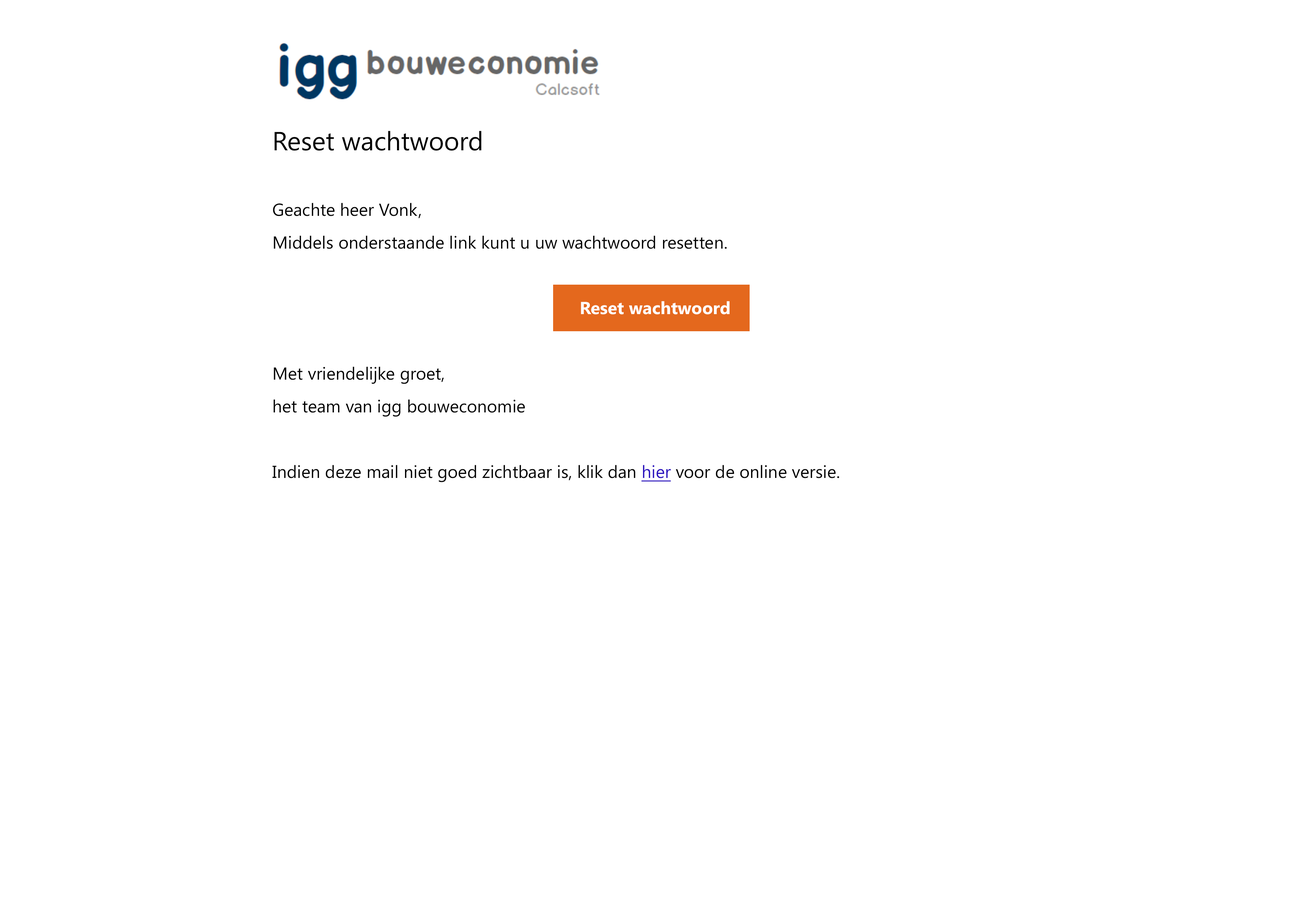
<style>
.page{position:relative;width:1310px;height:910px;background:#ffffff}
.page>*{position:absolute;margin:0}
.t1{font:17.5px/32.8px "SegoeUI";color:#000000}
.t2{font:26.2px/32.8px "SegoeUI";color:#000000}
.t3{font:17.5px/32.8px "SegoeUI-Bold";color:#ffffff}
.t4{font:17.5px/32.8px "SegoeUI";color:#2b13be;text-decoration:underline}
</style>
<div class="page">
<p class="t1" style="left:273px;top:131px;width:566px;height:351px"><span class="t2">Reset wachtwoord<br></span><br>Geachte heer Vonk,<br>Middels onderstaande link kunt u uw wachtwoord resetten.<br><br>                          <span class="t3">Reset wachtwoord<br></span><br>Met vriendelijke groet,<br>het team van igg bouweconomie<br><br>Indien deze mail niet goed zichtbaar is, klik dan <span class="t4">hier</span> voor de online versie.</p>
</div>
